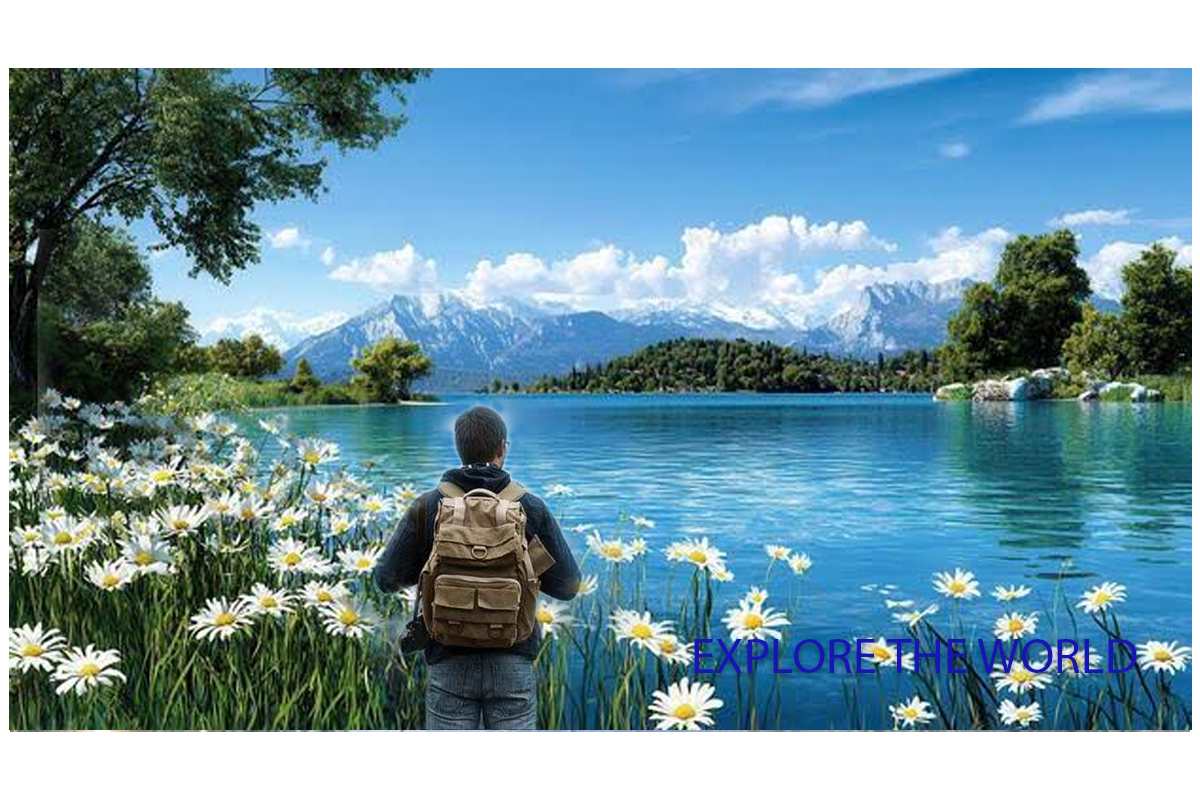
<style>
.page{position:relative;width:1200px;height:800px}
.page>*{position:absolute;margin:0}
.t1{font:50px "MyriadPro-Regular";color:#1816b2}
</style>
<div class="page">
<p class="t1" style="left:694px;top:639px;width:443px;height:34px">EXPLORE THE WORLD</p>
</div>
